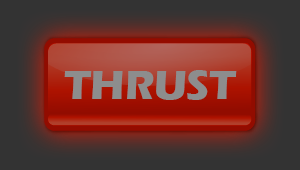
<style>
.page{position:relative;width:300px;height:170px;background:#333333}
.page>*{position:absolute;margin:0}
.t1{font:41.7px "ErasITC-Bold";color:#8d8d8d}
</style>
<div class="page">
<p class="t1" style="left:64px;top:70px;width:173px;height:30px">THRUST</p>
</div>
